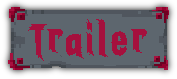
<style>
.page{position:relative;width:177px;height:79px;background:#5d666e}
.page>*{position:absolute;margin:0}
.t1{font:60px "ElderGodsBB";letter-spacing:0.025em;color:#a5103d}
</style>
<div class="page">
<p class="t1" style="left:28px;top:19px;width:119px;height:42px">Trailer</p>
</div>
